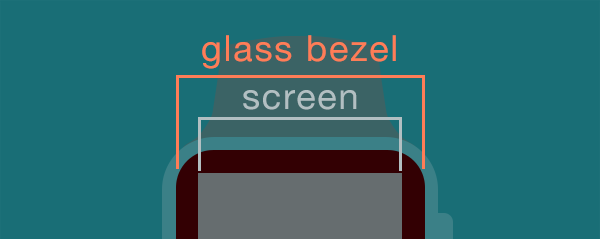
<style>
.page{position:relative;width:600px;height:239px;background:#196e76}
.page>*{position:absolute;margin:0}
.t1{font:36px "HelveticaNeue";letter-spacing:0.05em;color:#ff7d57}
.t2{font:36px "HelveticaNeue";letter-spacing:0.05em;color:#b2bfc2}
</style>
<div class="page">
<p class="t1" style="left:202px;top:35px;width:194px;height:34px">glass bezel</p>
<p class="t2" style="left:243px;top:90px;width:114px;height:20px">screen</p>
</div>
